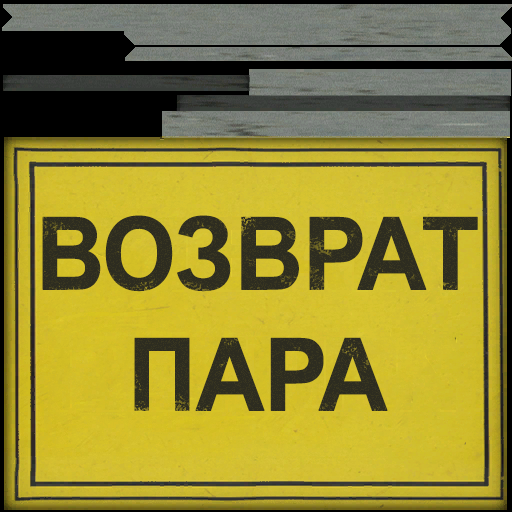
<style>
.page{position:relative;width:512px;height:512px}
.page>*{position:absolute;margin:0}
.t1{font:101px/121px "Arial-BoldMT";letter-spacing:-0.03em;color:#2d2c20;text-transform:uppercase;font-weight:bold;scale:0.94 1}
</style>
<div class="page">
<p class="t1" style="left:42px;top:215px;width:436px;height:196px;text-align:center">ВОЗВРАТ<br>ПАРА</p>
</div>
